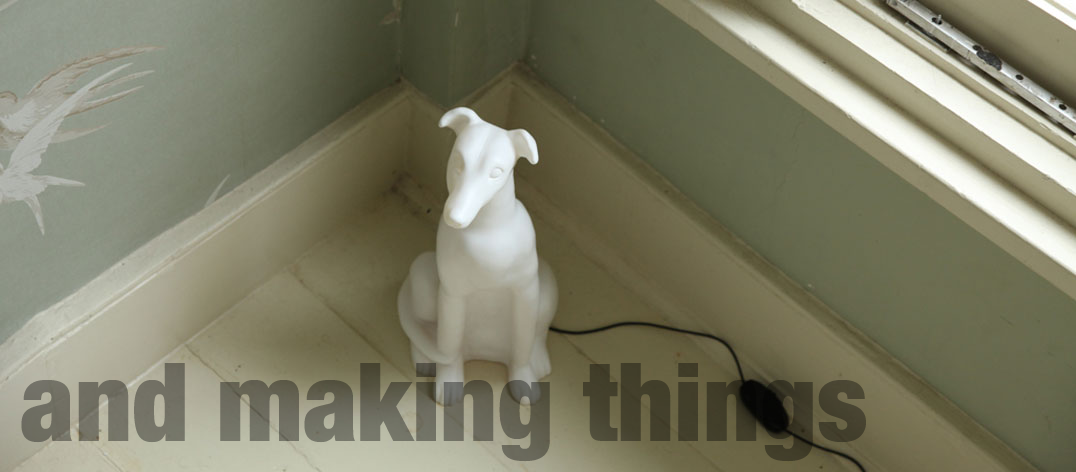
<style>
.page{position:relative;width:1076px;height:472px}
.page>*{position:absolute;margin:0}
.t1{font:109.6px "HelveticaNeue-CondensedBlack"}
</style>
<div class="page">
<p class="t1" style="left:21px;top:363px;width:845px;height:99px">and making things</p>
</div>
